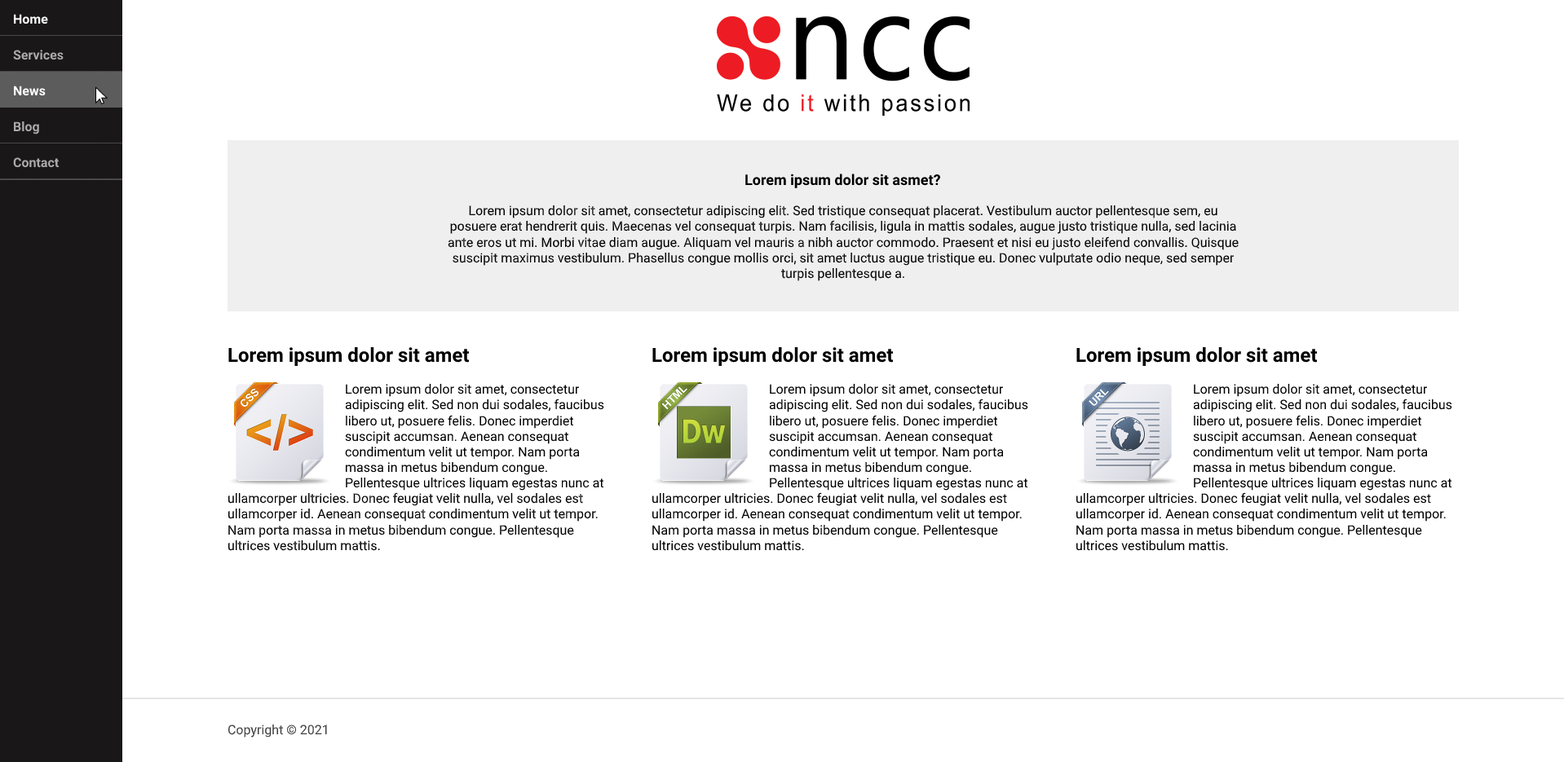
<style>
.page{position:relative;width:1564px;height:762px;background:#ffffff}
.page>*{position:absolute;margin:0}
.t1{font:13px "Roboto-Bold";color:#ffffff}
.t2{font:13px "Roboto-Bold";color:#aaaaaa}
.t3{font:14.7px "Roboto-Bold";color:#000000}
.t4{font:13px "Roboto-Regular";color:#000000}
.t5{font:19.6px "Roboto-Bold";color:#000000}
.t6{font:13px "Roboto-Regular";color:#3e3e3e}
</style>
<div class="page">
<p class="t1" style="left:14px;top:14px;width:34px;height:10px">Home</p>
<p class="t2" style="left:13px;top:50px;width:51px;height:10px">Services</p>
<p class="t1" style="left:14px;top:86px;width:32px;height:10px">News</p>
<p class="t2" style="left:14px;top:121px;width:25px;height:14px">Blog</p>
<p class="t2" style="left:13px;top:157px;width:46px;height:11px">Contact</p>
<p class="t3" style="left:745px;top:174px;width:195px;height:14px">Lorem ipsum dolor sit asmet?</p>
<p class="t4" style="left:448px;top:205px;width:791px;height:76px;text-align:center">Lorem ipsum dolor sit amet, consectetur adipiscing elit. Sed tristique consequat placerat. Vestibulum auctor pellentesque sem, eu posuere erat hendrerit quis. Maecenas vel consequat turpis. Nam facilisis, ligula in mattis sodales, augue justo tristique nulla, sed lacinia ante eros ut mi. Morbi vitae diam augue. Aliquam vel mauris a nibh auctor commodo. Praesent et nisi eu justo eleifend convallis. Quisque suscipit maximus vestibulum. Phasellus congue mollis orci, sit amet luctus augue tristique eu. Donec vulputate odio neque, sed semper turpis pellentesque a.</p>
<p class="t5" style="left:228px;top:347px;width:242px;height:19px">Lorem ipsum dolor sit amet</p>
<p class="t5" style="left:652px;top:347px;width:242px;height:19px">Lorem ipsum dolor sit amet</p>
<p class="t5" style="left:1076px;top:347px;width:242px;height:19px">Lorem ipsum dolor sit amet</p>
<p class="t4" style="left:345px;top:384px;width:259px;height:107px">Lorem ipsum dolor sit amet, consectetur adipiscing elit. Sed non dui sodales, faucibus libero ut, posuere felis. Donec imperdiet suscipit accumsan. Aenean consequat condimentum velit ut tempor. Nam porta massa in metus bibendum congue. Pellentesque ultrices liquam egestas nunc at</p>
<p class="t4" style="left:769px;top:384px;width:259px;height:107px">Lorem ipsum dolor sit amet, consectetur adipiscing elit. Sed non dui sodales, faucibus libero ut, posuere felis. Donec imperdiet suscipit accumsan. Aenean consequat condimentum velit ut tempor. Nam porta massa in metus bibendum congue. Pellentesque ultrices liquam egestas nunc at</p>
<p class="t4" style="left:1193px;top:384px;width:259px;height:107px">Lorem ipsum dolor sit amet, consectetur adipiscing elit. Sed non dui sodales, faucibus libero ut, posuere felis. Donec imperdiet suscipit accumsan. Aenean consequat condimentum velit ut tempor. Nam porta massa in metus bibendum congue. Pellentesque ultrices liquam egestas nunc at</p>
<p class="t4" style="left:228px;top:493px;width:370px;height:58px">ullamcorper ultricies. Donec feugiat velit nulla, vel sodales est ullamcorper id. Aenean consequat condimentum velit ut tempor. Nam porta massa in metus bibendum congue. Pellentesque ultrices vestibulum mattis.</p>
<p class="t4" style="left:652px;top:493px;width:370px;height:58px">ullamcorper ultricies. Donec feugiat velit nulla, vel sodales est ullamcorper id. Aenean consequat condimentum velit ut tempor. Nam porta massa in metus bibendum congue. Pellentesque ultrices vestibulum mattis.</p>
<p class="t4" style="left:1076px;top:493px;width:370px;height:58px">ullamcorper ultricies. Donec feugiat velit nulla, vel sodales est ullamcorper id. Aenean consequat condimentum velit ut tempor. Nam porta massa in metus bibendum congue. Pellentesque ultrices vestibulum mattis.</p>
<p class="t6" style="left:228px;top:725px;width:99px;height:13px">Copyright © 2021</p>
</div>
